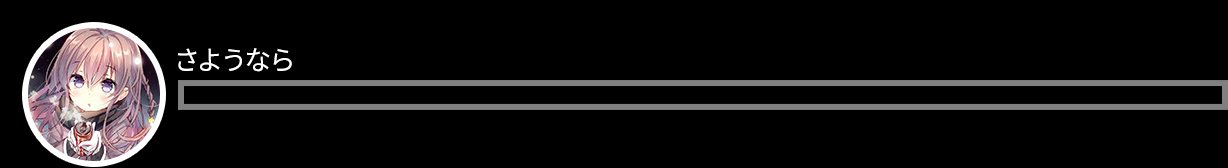
<style>
.page{position:relative;width:1228px;height:168px;background:#000000}
.page>*{position:absolute;margin:0}
.t1{font:27.1px "SourceHanSans-Regular";color:#ffffff}
</style>
<div class="page">
<p class="t1" style="left:178px;top:48px;width:114px;height:24px">さようなら</p>
</div>
